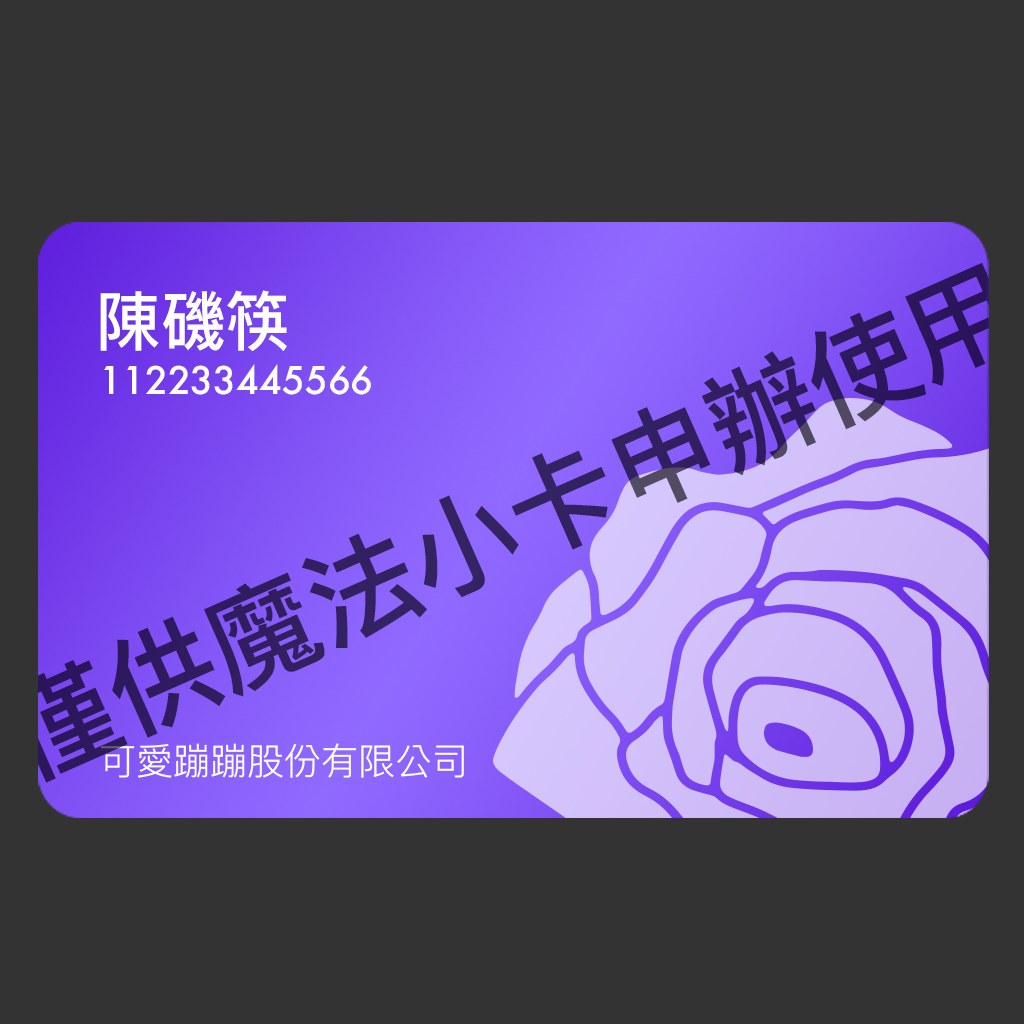
<style>
.page{position:relative;width:1024px;height:1024px;background:#333333}
.page>*{position:absolute;margin:0}
.t1{font:109.2px "PingFangTC-Medium";color:#301d60}
.t2{font:64.7px "PingFangTC-Medium";color:#ffffff}
.t3{font:37px "Futura-Medium";color:#ffffff}
.t4{font:37px "PingFangTC-Light";color:#ffffff}
</style>
<div class="page">
<p class="t1" style="left:12px;top:262px;width:1005px;height:521px;rotate:-24deg">僅供魔法小卡申辦使用</p>
<p class="t2" style="left:100px;top:290px;width:187px;height:61px">陳磯筷</p>
<p class="t3" style="left:104px;top:364px;width:267px;height:31px">112233445566</p>
<p class="t4" style="left:101px;top:743px;width:363px;height:35px">可愛蹦蹦股份有限公司</p>
</div>
